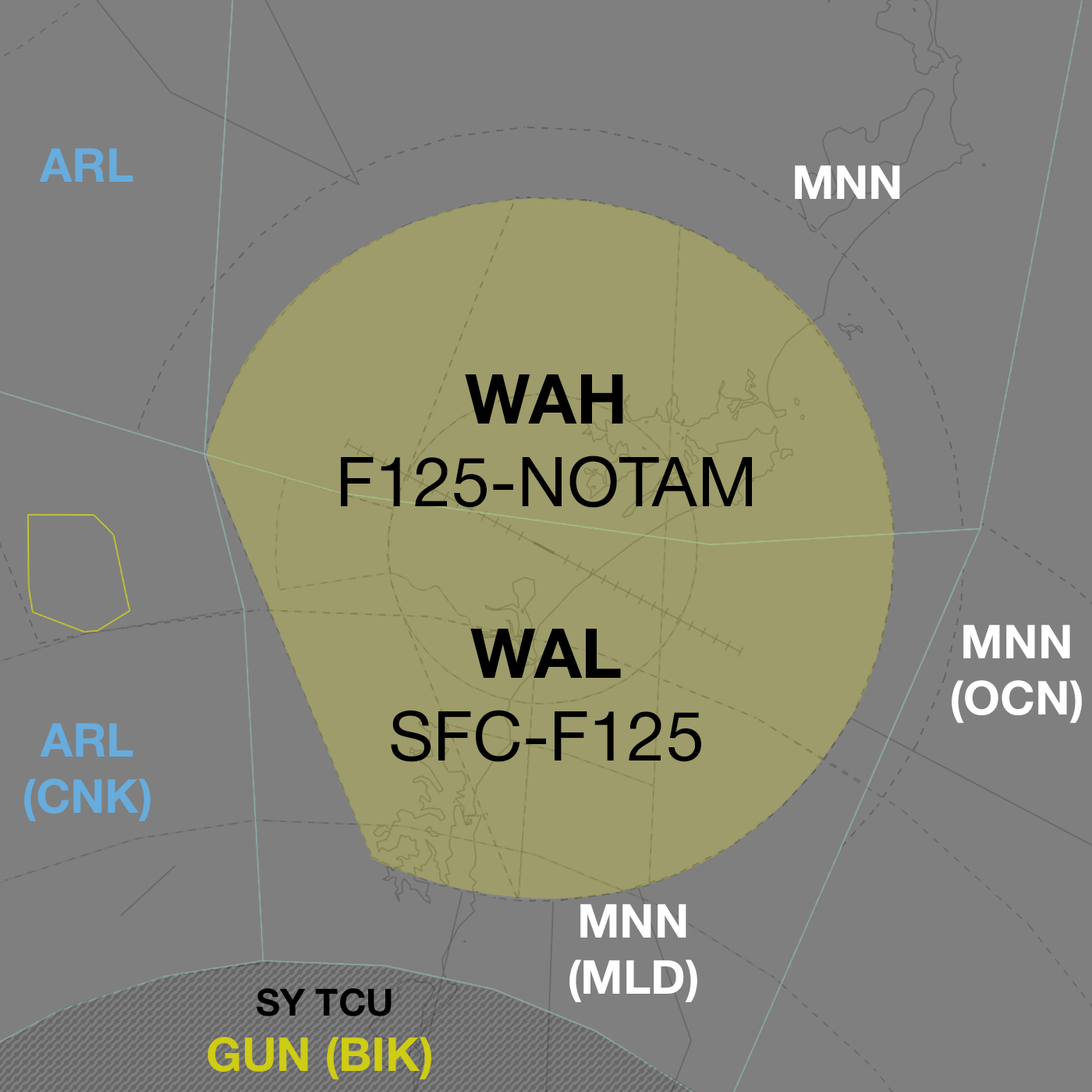
<style>
.page{position:relative;width:1092px;height:1092px;background:#7f7f7f}
.page>*{position:absolute;margin:0}
.t1{font:46.8px "HelveticaNeue-Bold";color:#67acdc}
.t2{font:46.8px "HelveticaNeue-Bold";color:#ffffff}
.t3{font:69px "HelveticaNeue-Roman";color:#000000}
.t4{font:69px "HelveticaNeue-Bold";color:#000000}
.t5{font:37.4px "HelveticaNeue-Bold";color:#000000}
.t6{font:46.8px "HelveticaNeue-Bold";color:#cecc13}
</style>
<div class="page">
<p class="t1" style="left:39px;top:148px;width:94px;height:34px">ARL</p>
<p class="t2" style="left:795px;top:165px;width:105px;height:34px">MNN</p>
<p class="t3" style="left:341px;top:374px;width:411px;height:134px;text-align:center"><span class="t4">WAH<br></span>F125-NOTAM</p>
<p class="t3" style="left:391px;top:629px;width:310px;height:133px;text-align:center"><span class="t4">WAL<br></span>SFC-F125</p>
<p class="t2" style="left:952px;top:625px;width:130px;height:98px;text-align:center">MNN<br>(OCN)</p>
<p class="t1" style="left:24px;top:723px;width:127px;height:98px;text-align:center">ARL<br>(CNK)</p>
<p class="t2" style="left:569px;top:904px;width:128px;height:98px;text-align:center">MNN<br>(MLD)</p>
<p class="t5" style="left:257px;top:988px;width:135px;height:28px">SY TCU</p>
<p class="t6" style="left:207px;top:1037px;width:224px;height:43px">GUN (BIK)</p>
</div>
